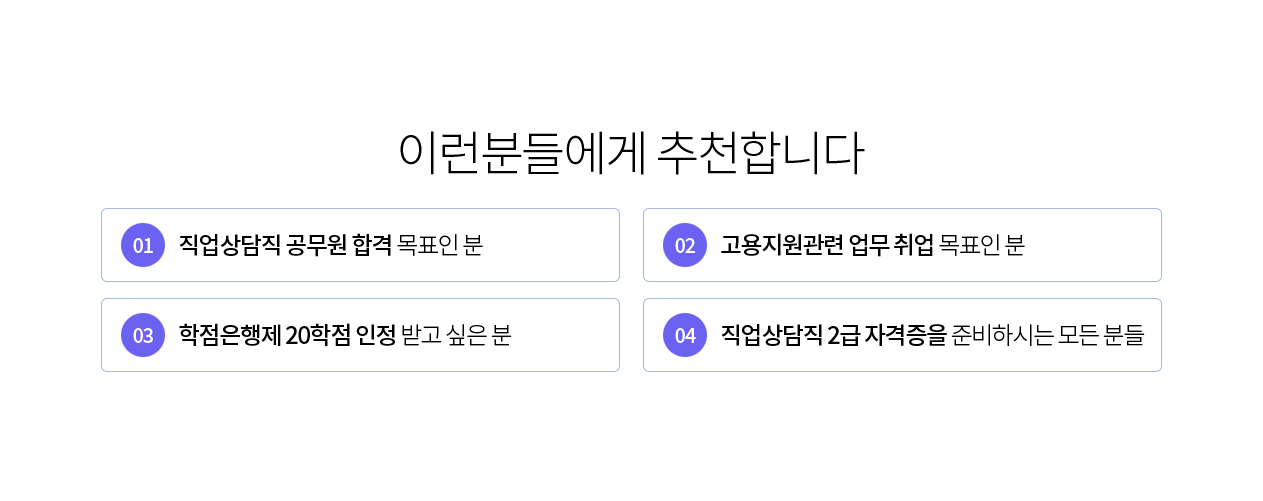
<style>
.page{position:relative;width:1263px;height:501px;background:#ffffff}
.page>*{position:absolute;margin:0}
.t1{font:48px "NotoSansKR-Light";letter-spacing:-0.05em;color:#000000}
.t2{font:24px "NotoSansKR-Medium";letter-spacing:-0.06em;color:#000000}
.t3{font:24px "NotoSansKR-Light";letter-spacing:-0.06em;color:#000000}
.t4{font:20px "NotoSansKR-Medium";letter-spacing:-0.06em;color:#ffffff}
</style>
<div class="page">
<p class="t1" style="left:400px;top:131px;width:465px;height:44px">이런분들에게 추천합니다</p>
<p class="t2" style="left:179px;top:233px;width:304px;height:24px">직업상담직 공무원 합격<span class="t3"> 목표인 분</span></p>
<p class="t2" style="left:721px;top:233px;width:304px;height:24px">고용지원관련 업무 취업<span class="t3"> 목표인 분</span></p>
<p class="t4" style="left:133px;top:238px;width:20px;height:15px">01</p>
<p class="t4" style="left:675px;top:238px;width:21px;height:15px">02</p>
<p class="t4" style="left:133px;top:328px;width:20px;height:15px">03</p>
<p class="t2" style="left:179px;top:323px;width:333px;height:23px">학점은행제 20학점 인정<span class="t3"> 받고 싶은 분</span></p>
<p class="t4" style="left:675px;top:328px;width:21px;height:15px">04</p>
<p class="t2" style="left:721px;top:323px;width:424px;height:23px">직업상담직 2급 자격증을<span class="t3"> 준비하시는 모든 분들</span></p>
</div>
